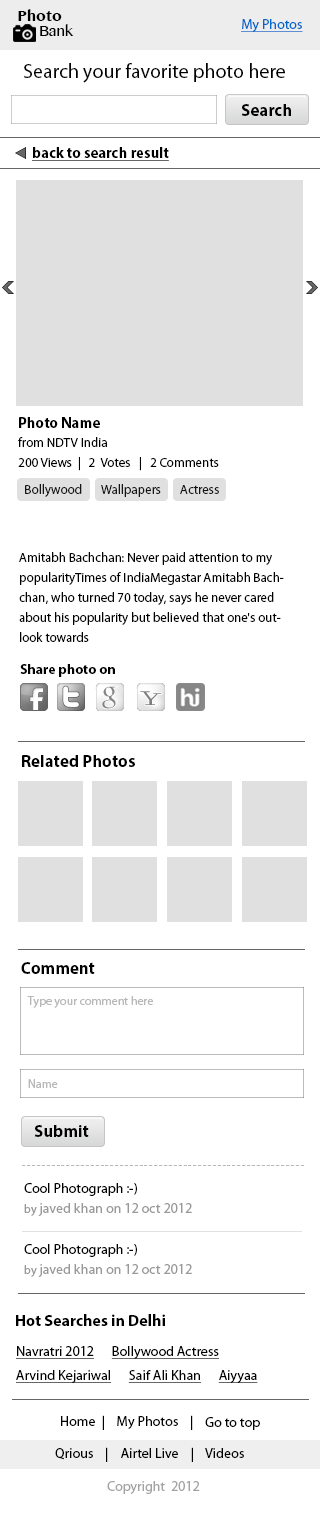
<style>
.page{position:relative;width:320px;height:1528px;background:#ffffff}
.page>*{position:absolute;margin:0}
.t1{font:14.7px/15.5px "TamilMN-Bold";color:#000000}
.t2{font:14.7px/15.5px "TamilMN";color:#000000}
.t3{font:14px "MyriadPro-Regular";color:#0066cc;text-decoration:underline}
.t4{font:20px "MyriadPro-Regular";color:#000000}
.t5{font:17px "MyriadPro-Bold";color:#000000}
.t6{font:15px "MyriadPro-Bold";color:#000000;text-decoration:underline}
.t7{font:15px "MyriadPro-Bold";color:#000000}
.t8{font:13px "MyriadPro-Regular";color:#000000}
.t9{font:13px/20px "MyriadPro-Regular";color:#000000}
.t10{font:14px "MyriadPro-Bold";color:#000000}
.t11{font:12px "MyriadPro-Regular";color:#b8b8b8}
.t12{font:12px "MyriadPro-Regular";letter-spacing:0.1em;color:#b8b8b8}
.t13{font:14px/20px "MyriadPro-Regular";color:#999999}
.t14{font:14px/20px "MyriadPro-Regular";color:#000000}
.t15{font:12px/20px "MyriadPro-Regular";color:#999999}
.t16{font:16px "MyriadPro-Bold";color:#000000}
.t17{font:14px/24px "MyriadPro-Regular";color:#000000;text-decoration:underline}
.t18{font:14px "MyriadPro-Regular";color:#000000}
.t19{font:14px "MyriadPro-Regular";color:#a3a3a3}
</style>
<div class="page">
<p class="t1" style="left:18px;top:9px;width:56px;height:27px">Photo<br><span class="t2">     Bank</span></p>
<p class="t3" style="left:241px;top:19px;width:62px;height:13px">My Photos</p>
<p class="t4" style="left:24px;top:63px;width:261px;height:20px">Search your favorite photo here</p>
<p class="t5" style="left:241px;top:104px;width:50px;height:12px">Search</p>
<p class="t6" style="left:32px;top:147px;width:137px;height:14px">back to search result</p>
<p class="t7" style="left:19px;top:417px;width:81px;height:11px">Photo Name</p>
<p class="t8" style="left:18px;top:437px;width:89px;height:10px">from NDTV India</p>
<p class="t8" style="left:18px;top:457px;width:201px;height:14px">200 Views  |   2  Votes   |   2 Comments</p>
<p class="t8" style="left:25px;top:484px;width:194px;height:13px">Bollywood       Wallpapers       Actress</p>
<p class="t9" style="left:19px;top:552px;width:265px;height:90px">Amitabh Bachchan: Never paid attention to my popularityTimes of IndiaMegastar Amitabh Bachchan, who turned 70 today, says he never cared about his popularity but believed that one's outlook towards</p>
<p class="t10" style="left:20px;top:664px;width:95px;height:13px">Share photo on</p>
<p class="t5" style="left:22px;top:755px;width:113px;height:12px">Related Photos</p>
<p class="t5" style="left:21px;top:962px;width:74px;height:12px">Comment</p>
<p class="t11" style="left:27px;top:996px;width:126px;height:12px">Type your comment here</p>
<p class="t11" style="left:28px;top:1079px;width:30px;height:9px">Name</p>
<p class="t5" style="left:34px;top:1125px;width:55px;height:12px">Submit</p>
<p class="t12" style="left:22px;top:1165px;width:282px;height:1px">----------------------------------------------------------</p>
<p class="t13" style="left:24px;top:1183px;width:168px;height:33px"><span class="t14">Cool Photograph :-)<br></span><span class="t15">by</span> javed khan on 12 oct 2012</p>
<p class="t13" style="left:24px;top:1244px;width:168px;height:33px"><span class="t14">Cool Photograph :-)<br></span><span class="t15">by</span> javed khan on 12 oct 2012</p>
<p class="t16" style="left:16px;top:1314px;width:149px;height:12px">Hot Searches in Delhi</p>
<p class="t17" style="left:16px;top:1346px;width:242px;height:37px">Navratri 2012      Bollywood Actress     <br>Arvind Kejariwal      Saif Ali Khan      Aiyyaa</p>
<p class="t18" style="left:61px;top:1415px;width:132px;height:15px">Home  |    My Photos    |</p>
<p class="t18" style="left:205px;top:1417px;width:55px;height:13px">Go to top</p>
<p class="t18" style="left:55px;top:1447px;width:189px;height:15px">Qrious    |    Airtel Live    |    Videos</p>
<p class="t19" style="left:107px;top:1481px;width:93px;height:13px">Copyright  2012</p>
</div>
